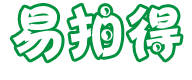
<style>
.page{position:relative;width:192px;height:80px;background:#ffffff}
.page>*{position:absolute;margin:0}
.t1{font:58.3px "HYo3gj";color:#ffffff}
</style>
<div class="page">
<p class="t1" style="left:12px;top:5px;width:169px;height:56px">易拍得</p>
</div>
